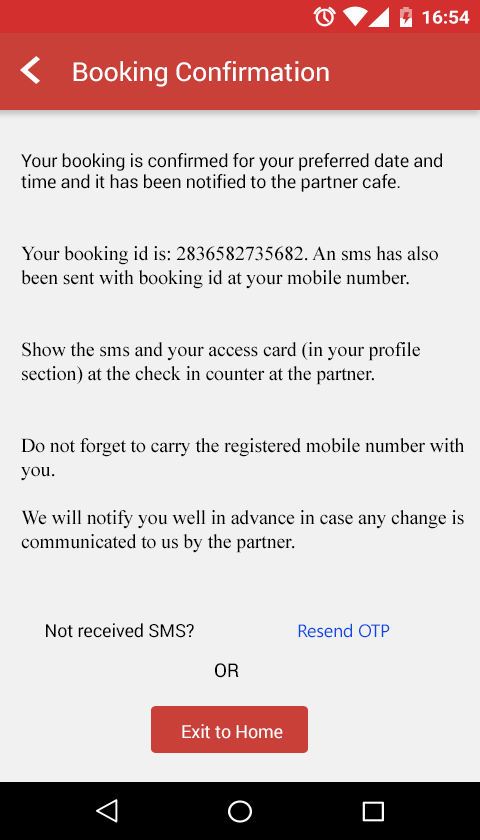
<style>
.page{position:relative;width:480px;height:840px;background:#f1f1f1}
.page>*{position:absolute;margin:0}
.t1{font:26.1px "Roboto-Regular";letter-spacing:-0.01em;color:#ffffff;scale:1.03 1}
.t2{font:20px "TimesNewRomanPSMT";letter-spacing:-0.01em;color:#000000}
.t3{font:20px "TimesNewRomanPSMT";letter-spacing:-0.01em;color:#ffffff}
.t4{font:18px "Roboto-Regular";letter-spacing:-0.01em;color:#000000}
.t5{font:18px "SegoeUI";letter-spacing:-0.01em;color:#0848e9}
.t6{font:19px "Roboto-Regular";letter-spacing:-0.01em;color:#000000}
.t7{font:18px "Roboto-Regular";letter-spacing:-0.01em;color:#ffffff}
</style>
<div class="page">
<p class="t1" style="left:73px;top:61px;width:256px;height:26px">Booking Confirmation</p>
<p class="t2" style="left:21px;top:153px;width:444px;height:400px"><span class="t3"><br></span><span class="t4">Your booking is confirmed for your preferred date and time and it has been notified to the partner cafe. <br></span><br><br>Your booking id is: 2836582735682. An sms has also been sent with booking id at your mobile number. <br><br><br>Show the sms and your access card (in your profile section) at the check in counter at the partner. <br><br><br>Do not forget to carry the registered mobile number with you.<br><br>We will notify you well in advance in case any change is communicated to us by the partner.</p>
<p class="t4" style="left:46px;top:623px;width:148px;height:15px">Not received SMS?</p>
<p class="t5" style="left:298px;top:623px;width:92px;height:15px">Resend OTP</p>
<p class="t6" style="left:215px;top:663px;width:24px;height:15px">OR</p>
<p class="t7" style="left:182px;top:724px;width:101px;height:15px">Exit to Home</p>
</div>
